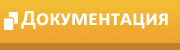
<style>
.page{position:relative;width:180px;height:50px}
.page>*{position:absolute;margin:0}
.t1{font:22px "Calibri-Bold";color:#ffffff;font-variant:small-caps}
</style>
<div class="page">
<p class="t1" style="left:21px;top:11px;width:147px;height:18px">Документация</p>
</div>
